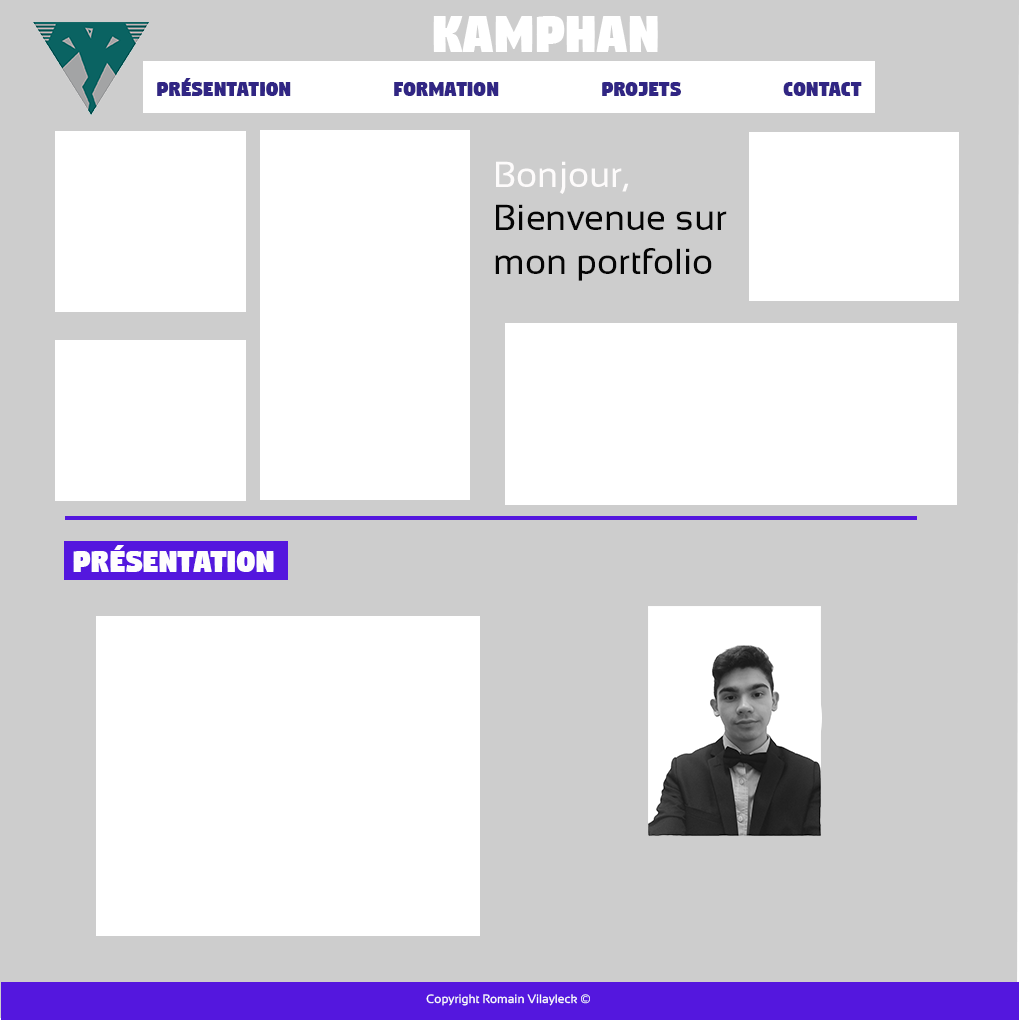
<style>
.page{position:relative;width:1020px;height:1020px;background:#cdcdcd}
.page>*{position:absolute;margin:0}
.t1{font:60px "Digitalt";color:#ffffff}
.t2{font:24px "Digitalt";color:#312684}
.t3{font:36px "Sansation-Regular";color:#050505}
.t4{font:36px "Sansation-Regular";color:#fdfbfb}
.t5{font:36px "Digitalt";color:#fefdfd}
.t6{font:12px "Sansation-Regular";color:#fffcfc}
</style>
<div class="page">
<p class="t1" style="left:433px;top:16px;width:225px;height:36px">kamphan</p>
<p class="t2" style="left:157px;top:78px;width:705px;height:18px">Présentation formation projets contact</p>
<p class="t3" style="left:495px;top:161px;width:232px;height:120px"><span class="t4">Bonjour,<br></span>Bienvenue sur mon portfolio</p>
<p class="t5" style="left:73px;top:545px;width:201px;height:27px">Présentation</p>
<p class="t6" style="left:426px;top:994px;width:164px;height:12px">Copyright Romain Vilayleck ©</p>
</div>
